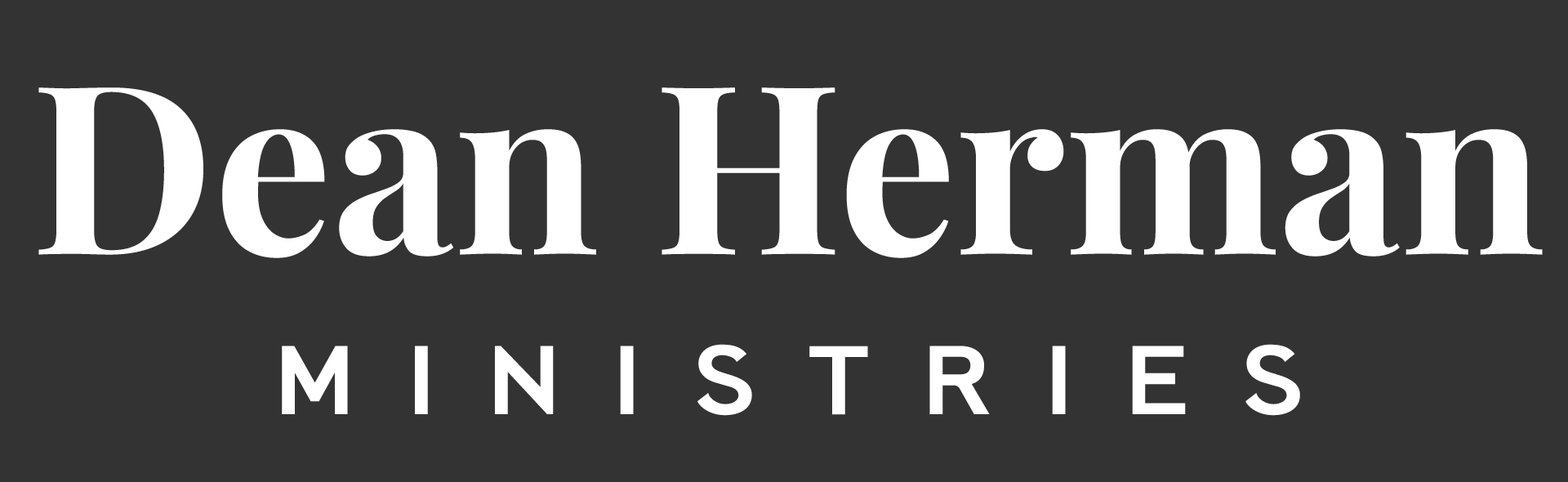
<style>
.page{position:relative;width:1568px;height:482px;background:#333333}
.page>*{position:absolute;margin:0}
.t1{font:235.6px "PlayfairDisplay-Bold";color:#ffffff}
.t2{font:96.1px "MangabirdSans-ExtraBold";letter-spacing:0.6em;color:#ffffff;text-transform:uppercase}
</style>
<div class="page">
<p class="t1" style="left:38px;top:87px;width:1505px;height:171px">Dean Herman</p>
<p class="t2" style="left:282px;top:344px;width:1018px;height:72px">ministries</p>
</div>
